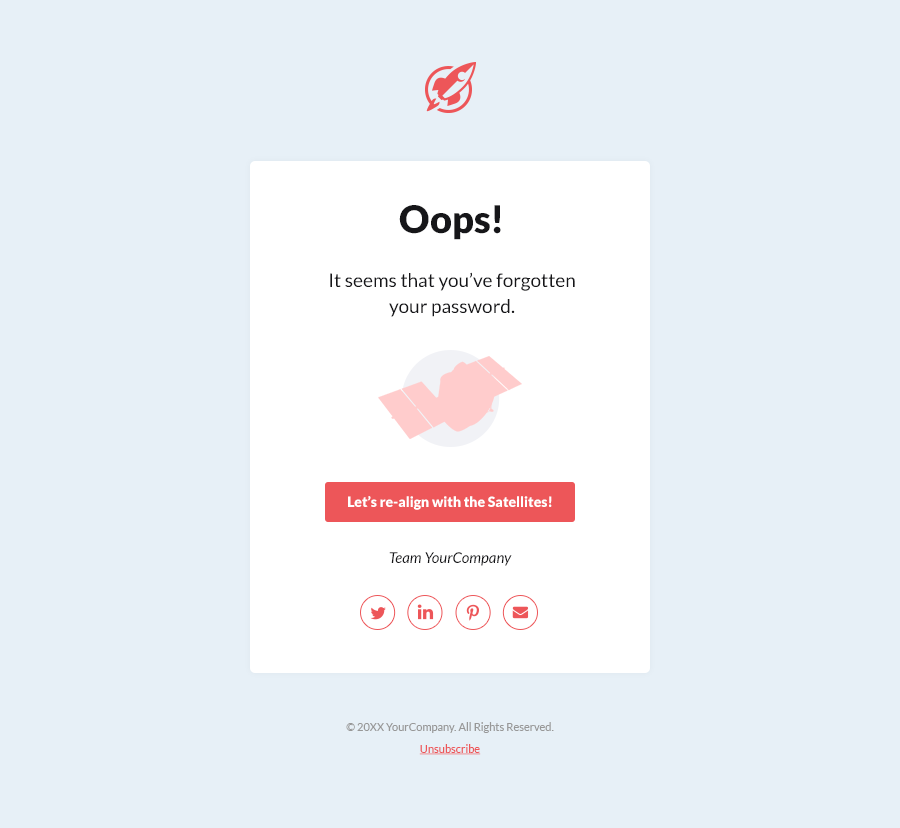
<style>
.page{position:relative;width:900px;height:828px;background:#e7f0f7}
.page>*{position:absolute;margin:0}
.t1{font:38px "Lato-Black";color:#161619}
.t2{font:19px/26px "Lato-Regular";color:#161619}
.t3{font:14px "Lato-Black";color:#ffffff}
.t4{font:15px "Lato-Italic";color:#161619}
.t5{font:11px/22px "Lato-Regular";color:#989898}
.t6{font:11px/22px "Lato-Regular";color:#ed5659;text-decoration:underline}
</style>
<div class="page">
<p class="t1" style="left:399px;top:205px;width:102px;height:35px">Oops!</p>
<p class="t2" style="left:330px;top:272px;width:245px;height:45px;text-align:center">It seems that you’ve forgotten your password.</p>
<p class="t3" style="left:348px;top:496px;width:204px;height:14px">Let’s re-align with the Satellites!</p>
<p class="t4" style="left:389px;top:552px;width:123px;height:14px">Team YourCompany</p>
<p class="t5" style="left:346px;top:722px;width:208px;height:33px;text-align:center">© 20XX YourCompany. All Rights Reserved.<br><span class="t6">Unsubscribe</span></p>
</div>
